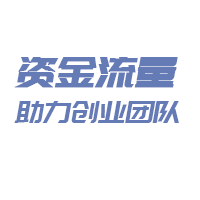
<style>
.page{position:relative;width:200px;height:200px;background:#ffffff}
.page>*{position:absolute;margin:0}
.t1{font:30px/36px "PangMenZhengDao";color:#657bb6;font-style:italic}
.t2{font:42px/36px "PangMenZhengDao";color:#657bb6;font-weight:bold;font-style:italic}
</style>
<div class="page">
<p class="t1" style="left:14px;top:57px;width:165px;height:66px"><span class="t2">资金流量<br></span>助力创业团队</p>
</div>
